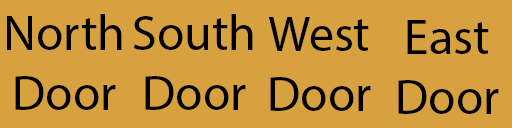
<style>
.page{position:relative;width:512px;height:128px;background:#d8a140}
.page>*{position:absolute;margin:0}
.t1{font:12px "MyriadPro-Regular";color:#000000}
</style>
<div class="page">
<p class="t1" style="left:7px;top:14px;width:115px;height:96px;text-align:center">North<br>Door</p>
<p class="t1" style="left:133px;top:14px;width:120px;height:96px;text-align:center">South<br>Door</p>
<p class="t1" style="left:268px;top:17px;width:103px;height:94px;text-align:center">West<br>Door</p>
<p class="t1" style="left:398px;top:20px;width:101px;height:94px;text-align:center">East<br>Door</p>
</div>
